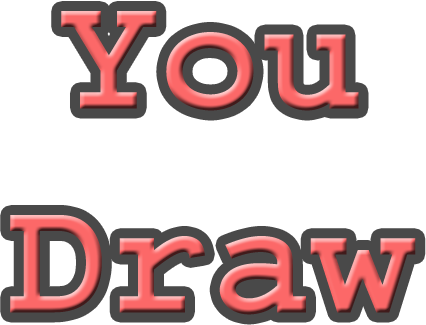
<style>
.page{position:relative;width:426px;height:325px;background:#ffffff}
.page>*{position:absolute;margin:0}
.t1{font:170px "Courier-Bold"}
</style>
<div class="page">
<p class="t1" style="left:10px;top:11px;width:406px;height:304px;text-align:center">You<br>Draw</p>
</div>
